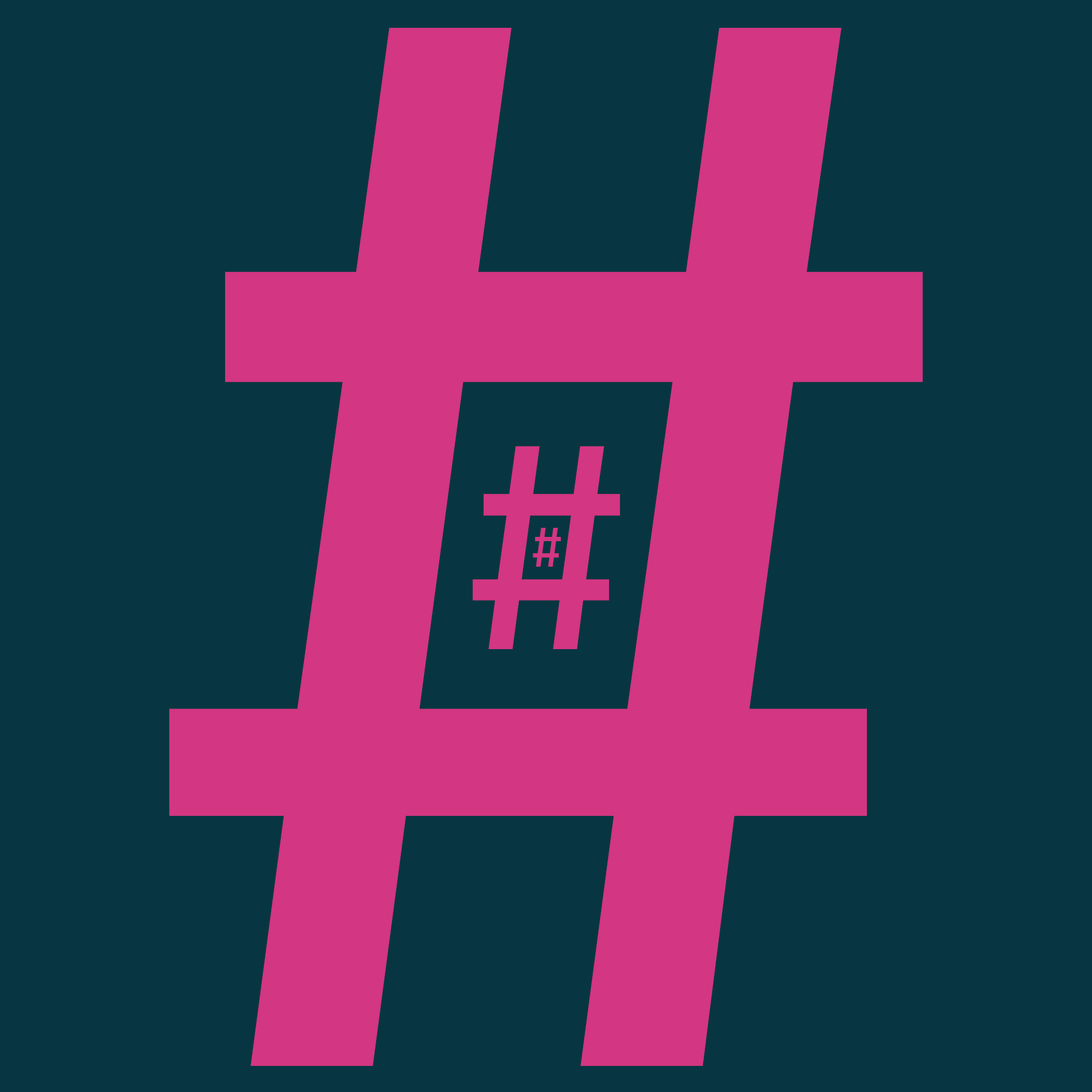
<style>
.page{position:relative;width:1092px;height:1092px;background:#073642}
.page>*{position:absolute;margin:0}
.t1{font:1506.6px "FiraCode-Retina";color:#d33682}
.t2{font:294.3px "FiraCode-Retina";color:#d33682}
.t3{font:55.6px "FiraCode-Retina";color:#d33682}
</style>
<div class="page">
<p class="t1" style="left:169px;top:27px;width:754px;height:1039px">#</p>
<p class="t2" style="left:473px;top:446px;width:147px;height:203px">#</p>
<p class="t3" style="left:533px;top:528px;width:28px;height:39px">#</p>
</div>
